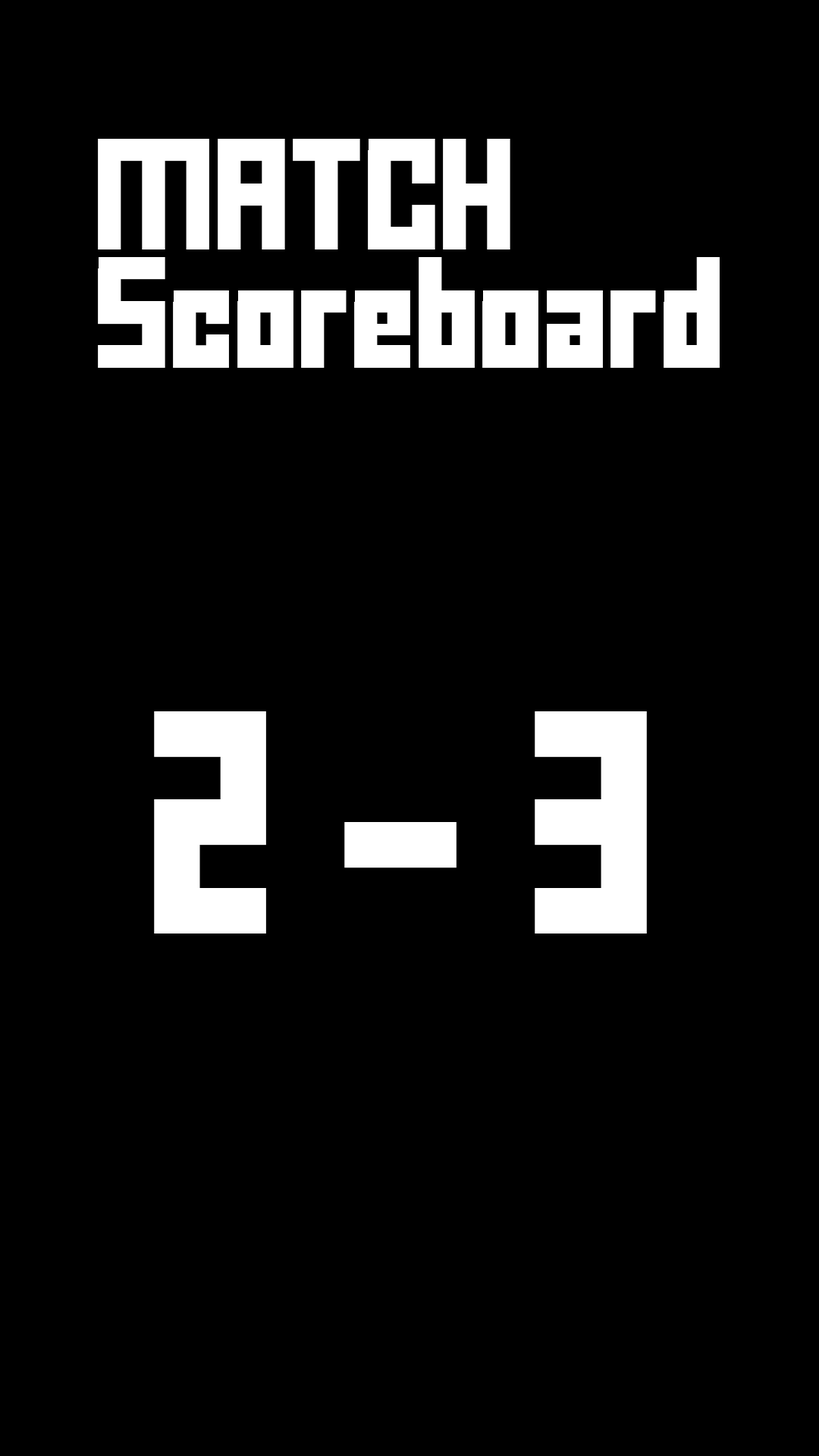
<style>
.page{position:relative;width:819px;height:1456px;background:#000000}
.page>*{position:absolute;margin:0}
.t1{font:151.7px/59.1px "FFFForward";letter-spacing:-0.025em;color:#ffffff}
.t2{font:303.3px "FFFForward";letter-spacing:-0.025em;color:#ffffff}
</style>
<div class="page">
<p class="t1" style="left:98px;top:139px;width:622px;height:229px">MATCH<br><br>Scoreboard</p>
<p class="t2" style="left:154px;top:711px;width:493px;height:222px">2 - 3</p>
</div>
